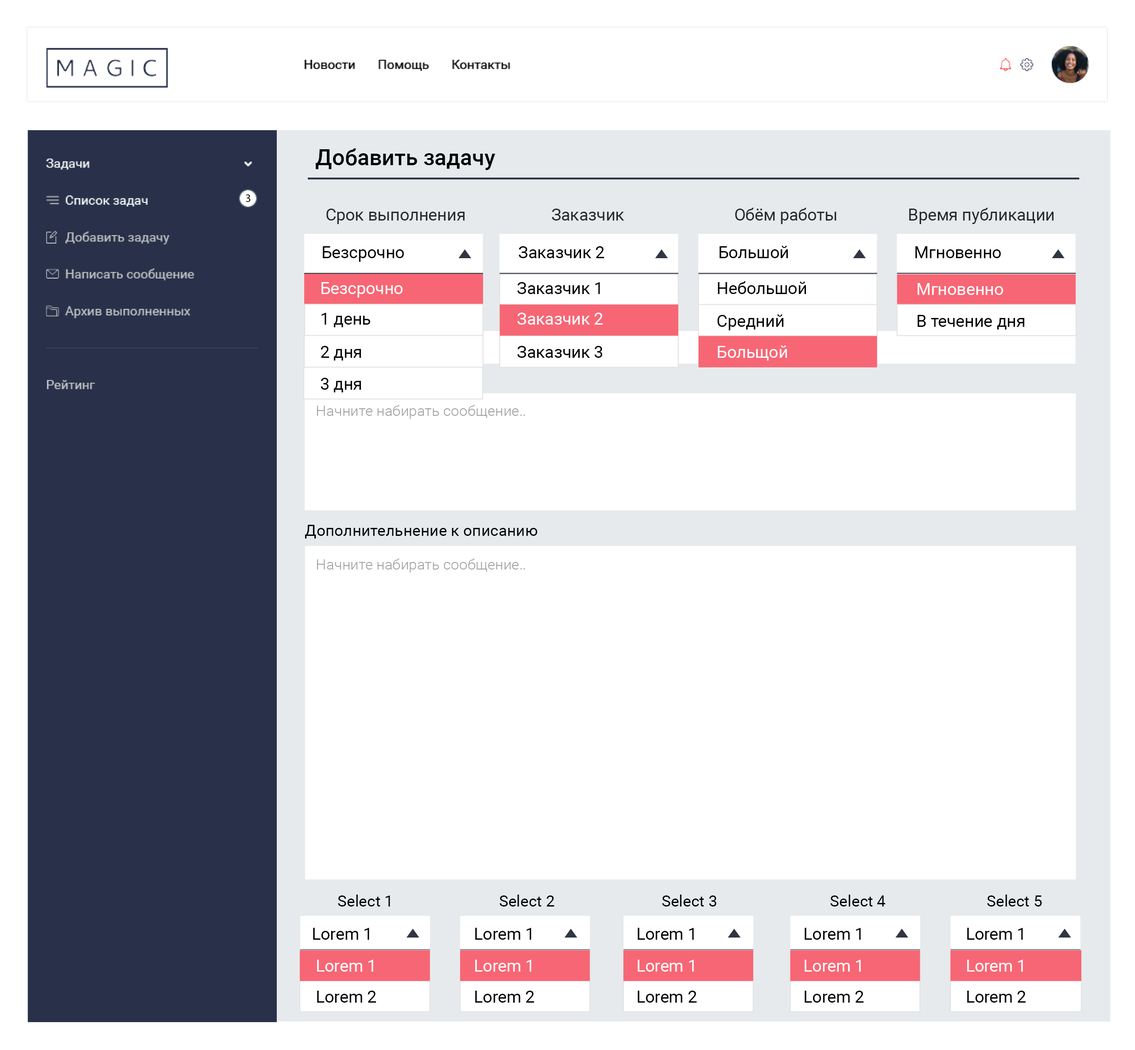
<style>
.page{position:relative;width:1135px;height:1050px;background:#ffffff}
.page>*{position:absolute;margin:0}
.t1{font:22.1px "Roboto-Medium";color:#000000}
.t2{font:11.1px "MyriadPro-Regular";color:#000000}
.t3{font:16.6px "Roboto-Regular";color:#27292d}
.t4{font:16.6px "Roboto-Regular";color:#000000}
.t5{font:16.6px "Roboto-Regular";color:#ffffff}
.t6{font:14.8px "Roboto-Light";color:#a0a0a0}
.t7{font:15.7px "Roboto-Regular";color:#000000}
</style>
<div class="page">
<p class="t1" style="left:315px;top:148px;width:180px;height:22px">Добавить задачу</p>
<p class="t2" style="left:246px;top:194px;width:5px;height:8px">3</p>
<p class="t3" style="left:326px;top:209px;width:139px;height:15px">Срок выполнения</p>
<p class="t3" style="left:552px;top:209px;width:73px;height:12px">Заказчик</p>
<p class="t3" style="left:735px;top:208px;width:102px;height:16px">Обём работы</p>
<p class="t3" style="left:909px;top:208px;width:145px;height:16px">Время публикации</p>
<p class="t4" style="left:720px;top:246px;width:68px;height:12px">Большой</p>
<p class="t4" style="left:323px;top:246px;width:81px;height:16px">Безсрочно</p>
<p class="t4" style="left:519px;top:246px;width:85px;height:12px">Заказчик 2</p>
<p class="t4" style="left:916px;top:246px;width:85px;height:12px">Мгновенно</p>
<p class="t4" style="left:718px;top:281px;width:88px;height:13px">Небольшой</p>
<p class="t5" style="left:322px;top:282px;width:81px;height:16px">Безсрочно</p>
<p class="t4" style="left:517px;top:282px;width:83px;height:12px">Заказчик 1</p>
<p class="t5" style="left:918px;top:283px;width:85px;height:12px">Мгновенно</p>
<p class="t4" style="left:322px;top:313px;width:48px;height:14px">1 день</p>
<p class="t5" style="left:517px;top:313px;width:86px;height:12px">Заказчик 2</p>
<p class="t4" style="left:718px;top:315px;width:66px;height:15px">Средний</p>
<p class="t4" style="left:918px;top:315px;width:107px;height:15px">В течение дня</p>
<p class="t4" style="left:321px;top:346px;width:40px;height:15px">2 дня</p>
<p class="t4" style="left:517px;top:346px;width:85px;height:12px">Заказчик 3</p>
<p class="t5" style="left:718px;top:346px;width:69px;height:15px">Больщой</p>
<p class="t4" style="left:321px;top:378px;width:40px;height:14px">3 дня</p>
<p class="t6" style="left:317px;top:405px;width:208px;height:14px">Начните набирать сообщение..</p>
<p class="t7" style="left:305px;top:525px;width:233px;height:14px">Дополнительнение к описанию</p>
<p class="t6" style="left:317px;top:559px;width:208px;height:14px">Начните набирать сообщение..</p>
<p class="t7" style="left:338px;top:895px;width:52px;height:12px">Select 1</p>
<p class="t7" style="left:500px;top:895px;width:55px;height:12px">Select 2</p>
<p class="t7" style="left:662px;top:895px;width:55px;height:12px">Select 3</p>
<p class="t7" style="left:831px;top:895px;width:55px;height:12px">Select 4</p>
<p class="t7" style="left:987px;top:895px;width:55px;height:12px">Select 5</p>
<p class="t4" style="left:313px;top:928px;width:56px;height:12px">Lorem 1</p>
<p class="t4" style="left:475px;top:928px;width:57px;height:12px">Lorem 1</p>
<p class="t4" style="left:638px;top:928px;width:56px;height:12px">Lorem 1</p>
<p class="t4" style="left:805px;top:928px;width:56px;height:12px">Lorem 1</p>
<p class="t4" style="left:967px;top:928px;width:56px;height:12px">Lorem 1</p>
<p class="t5" style="left:317px;top:960px;width:56px;height:12px">Lorem 1</p>
<p class="t5" style="left:475px;top:960px;width:57px;height:12px">Lorem 1</p>
<p class="t5" style="left:638px;top:960px;width:56px;height:12px">Lorem 1</p>
<p class="t5" style="left:805px;top:960px;width:56px;height:12px">Lorem 1</p>
<p class="t5" style="left:967px;top:960px;width:56px;height:12px">Lorem 1</p>
<p class="t4" style="left:317px;top:991px;width:59px;height:12px">Lorem 2</p>
<p class="t4" style="left:475px;top:991px;width:59px;height:12px">Lorem 2</p>
<p class="t4" style="left:638px;top:991px;width:59px;height:12px">Lorem 2</p>
<p class="t4" style="left:805px;top:991px;width:59px;height:12px">Lorem 2</p>
<p class="t4" style="left:967px;top:991px;width:59px;height:12px">Lorem 2</p>
</div>
